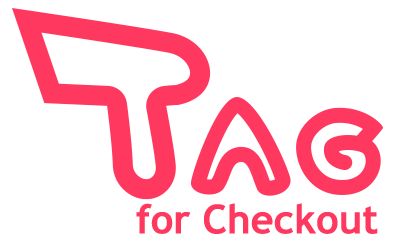
<style>
.page{position:relative;width:400px;height:245px;background:#ffffff}
.page>*{position:absolute;margin:0}
.t1{font:40px "TrebuchetMS-Bold";color:#ff3860}
</style>
<div class="page">
<p class="t1" style="left:136px;top:203px;width:242px;height:31px">for Checkout</p>
</div>
